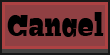
<style>
.page{position:relative;width:110px;height:55px;background:#904043}
.page>*{position:absolute;margin:0}
.t1{font:33px "Bigfish-Black";color:#000000;scale:0.74 1}
</style>
<div class="page">
<p class="t1" style="left:7px;top:12px;width:97px;height:25px">Cancel</p>
</div>
